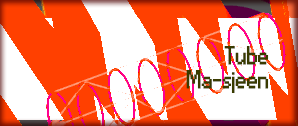
<style>
.page{position:relative;width:298px;height:126px;background:#ff4000}
.page>*{position:absolute;margin:0}
.t1{font:24px/24px "Small Fonts";color:#393b00;font-weight:bold}
</style>
<div class="page">
<p class="t1" style="left:186px;top:46px;width:83px;height:47px;text-align:right">Tube<br>Ma-sjeen</p>
</div>
